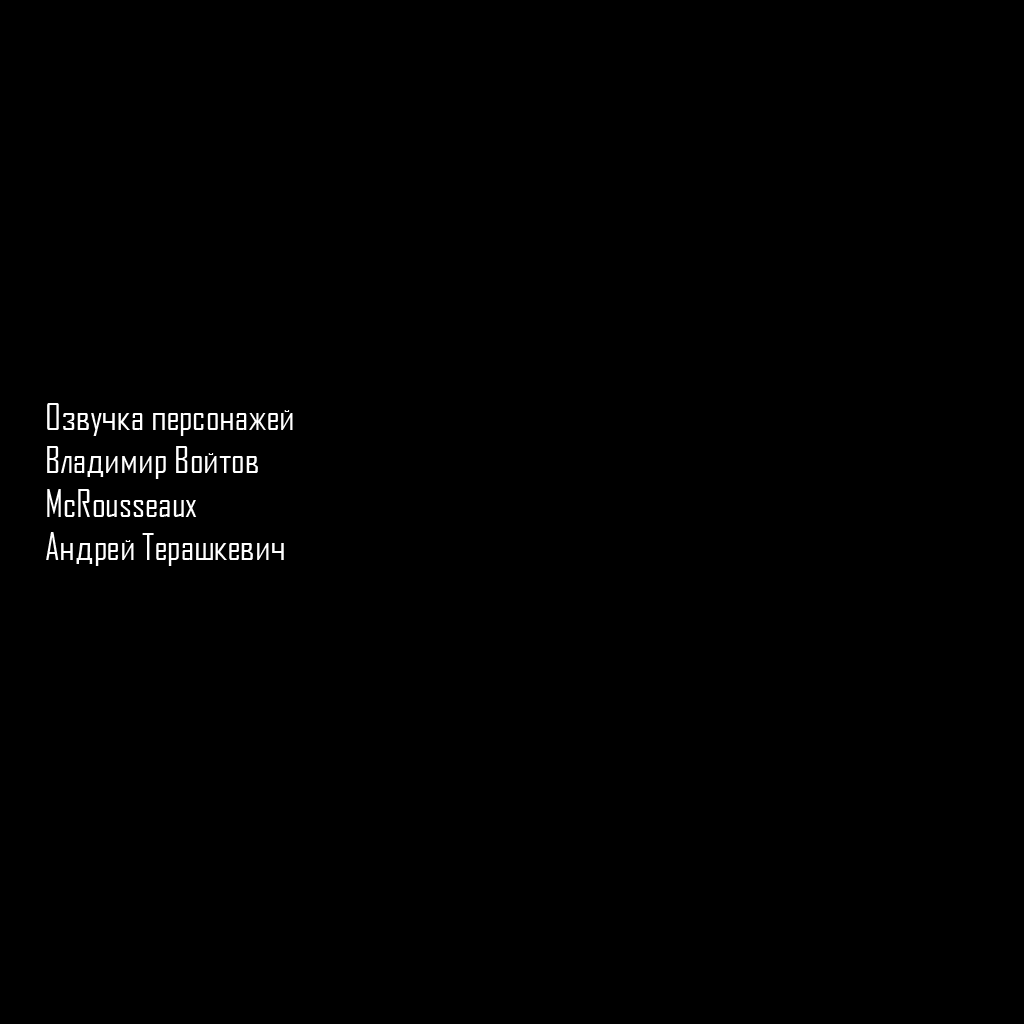
<style>
.page{position:relative;width:1024px;height:1024px;background:#000000}
.page>*{position:absolute;margin:0}
.t1{font:36px "AgencyFBCyrillic";color:#ffffff}
</style>
<div class="page">
<p class="t1" style="left:46px;top:403px;width:247px;height:163px">Озвучка персонажей<br>Владимир Войтов<br>McRousseaux<br>Андрей Терашкевич</p>
</div>
